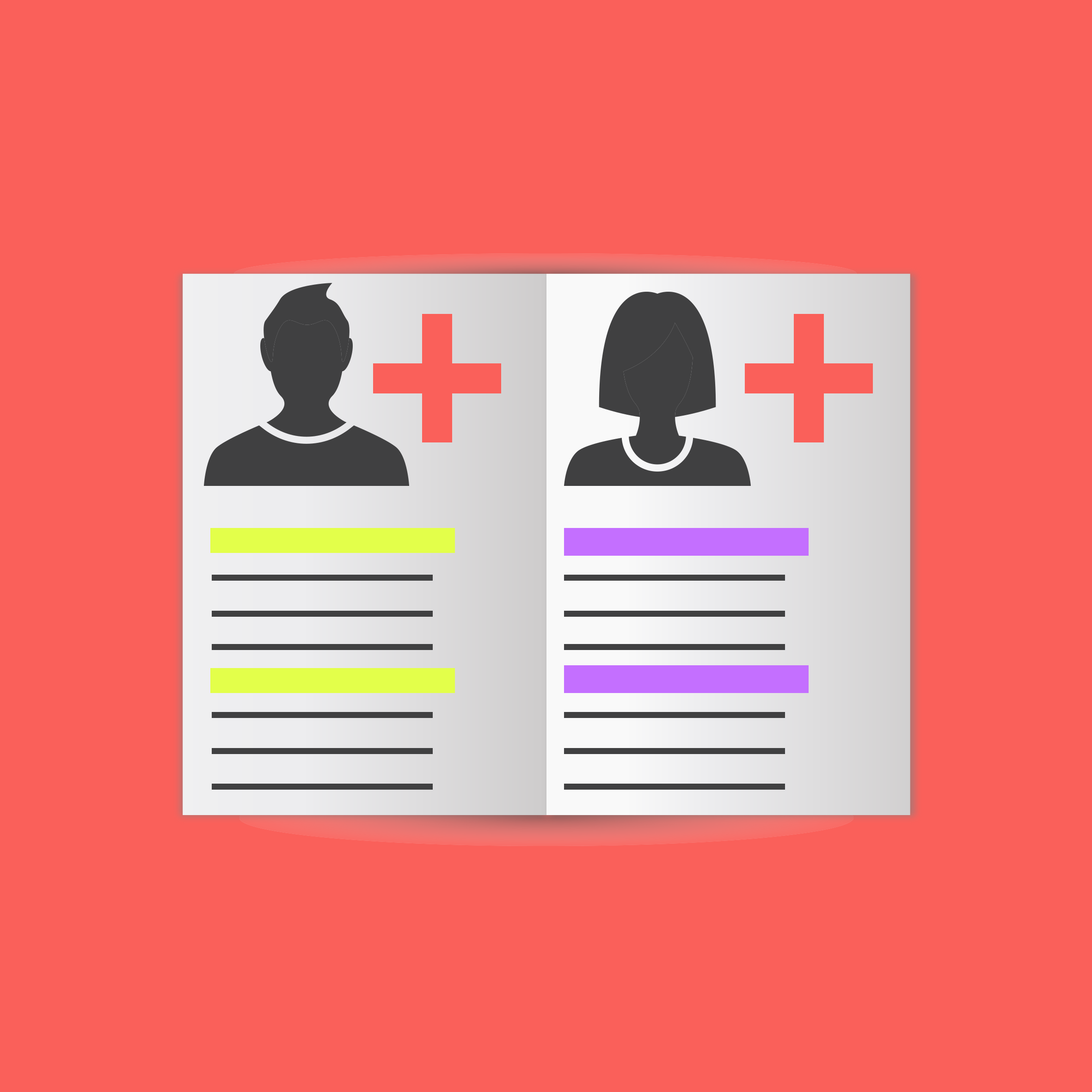
<style>
.page{position:relative;width:1092px;height:1092px;background:#fa605a}
.page>*{position:absolute;margin:0}
.t1{font:288.9px "SportsWorld";color:#fa605a}
</style>
<div class="page">
<p class="t1" style="left:373px;top:314px;width:128px;height:128px">+</p>
<p class="t1" style="left:745px;top:314px;width:128px;height:128px">+</p>
</div>
